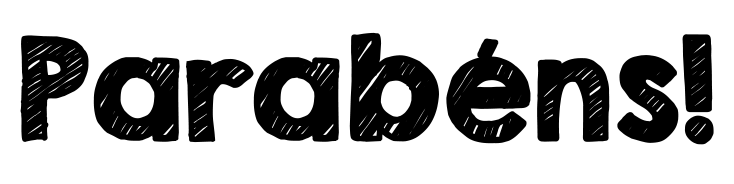
<style>
.page{position:relative;width:734px;height:184px;background:#ffffff}
.page>*{position:absolute;margin:0}
.t1{font:125px "KGSecondChancesSketch";color:#000000;font-weight:bold}
</style>
<div class="page">
<p class="t1" style="left:20px;top:32px;width:694px;height:113px">Parabéns!</p>
</div>
